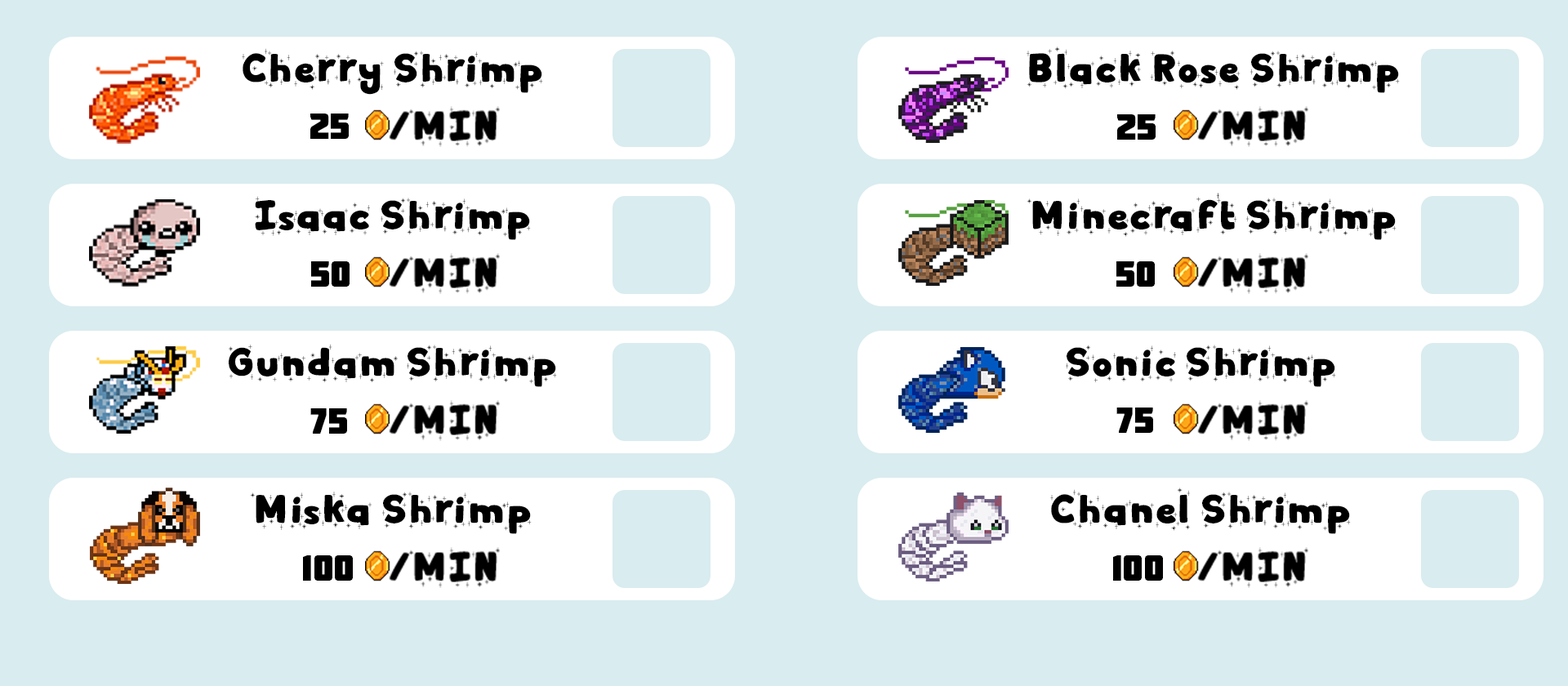
<style>
.page{position:relative;width:1568px;height:686px;background:#d9ecf0}
.page>*{position:absolute;margin:0}
.t1{font:36.8px "WinterDairy-Shiny";color:#000000}
.t2{font:36.8px "Molot";color:#000000}
</style>
<div class="page">
<p class="t1" style="left:242px;top:48px;width:301px;height:47px">Cherry Shrimp</p>
<p class="t1" style="left:1027px;top:47px;width:373px;height:46px">Black Rose Shrimp</p>
<p class="t2" style="left:310px;top:114px;width:39px;height:25px">25</p>
<p class="t2" style="left:1117px;top:114px;width:39px;height:26px">25</p>
<p class="t1" style="left:255px;top:196px;width:276px;height:44px">Isaac Shrimp</p>
<p class="t1" style="left:1027px;top:193px;width:369px;height:47px">Minecraft Shrimp</p>
<p class="t2" style="left:311px;top:261px;width:39px;height:26px">50</p>
<p class="t2" style="left:1116px;top:261px;width:39px;height:26px">50</p>
<p class="t1" style="left:229px;top:344px;width:328px;height:43px">Gundam Shrimp</p>
<p class="t1" style="left:1066px;top:345px;width:270px;height:42px">Sonic Shrimp</p>
<p class="t2" style="left:310px;top:408px;width:37px;height:26px">75</p>
<p class="t2" style="left:1116px;top:408px;width:37px;height:25px">75</p>
<p class="t1" style="left:250px;top:492px;width:282px;height:42px">Miska Shrimp</p>
<p class="t1" style="left:1050px;top:488px;width:301px;height:46px">Chanel Shrimp</p>
<p class="t2" style="left:303px;top:555px;width:50px;height:26px">100</p>
<p class="t2" style="left:1113px;top:555px;width:50px;height:26px">100</p>
</div>
